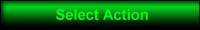
<style>
.page{position:relative;width:200px;height:30px}
.page>*{position:absolute;margin:0}
.t1{font:14.7px "Arial-BoldMT";color:#00ff1e}
</style>
<div class="page">
<p class="t1" style="left:56px;top:9px;width:92px;height:11px">Select Action</p>
</div>
